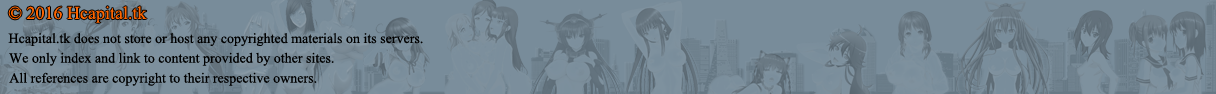
<style>
.page{position:relative;width:1216px;height:94px;background:#788c9a}
.page>*{position:absolute;margin:0}
.t1{font:18px "TimesNewRomanPSMT";color:#fe6500}
.t2{font:14px "TimesNewRomanPSMT";color:#000000}
</style>
<div class="page">
<p class="t1" style="left:8px;top:6px;width:139px;height:17px">© 2016 Hcapital.tk</p>
<p class="t2" style="left:8px;top:33px;width:415px;height:13px">Hcapital.tk does not store or host any copyrighted materials on its servers.</p>
<p class="t2" style="left:9px;top:52px;width:325px;height:14px">We only index and link to content provided by other sites.</p>
<p class="t2" style="left:9px;top:72px;width:308px;height:14px">All references are copyright to their respective owners.</p>
</div>
